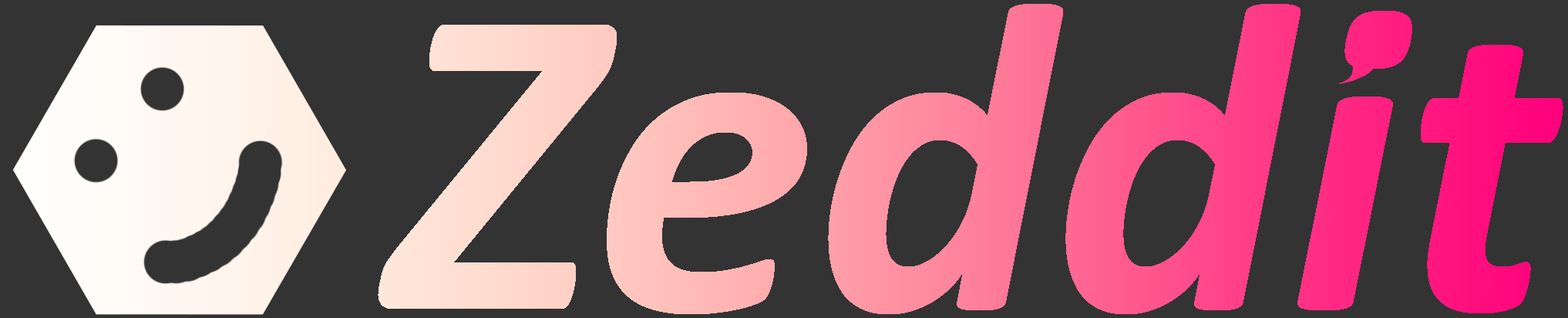
<style>
.page{position:relative;width:1568px;height:318px;background:#333333}
.page>*{position:absolute;margin:0}
.t1{font:449.7px "Calibri-BoldItalic"}
</style>
<div class="page">
<p class="t1" style="left:378px;top:4px;width:1185px;height:310px">Zeddit</p>
</div>
